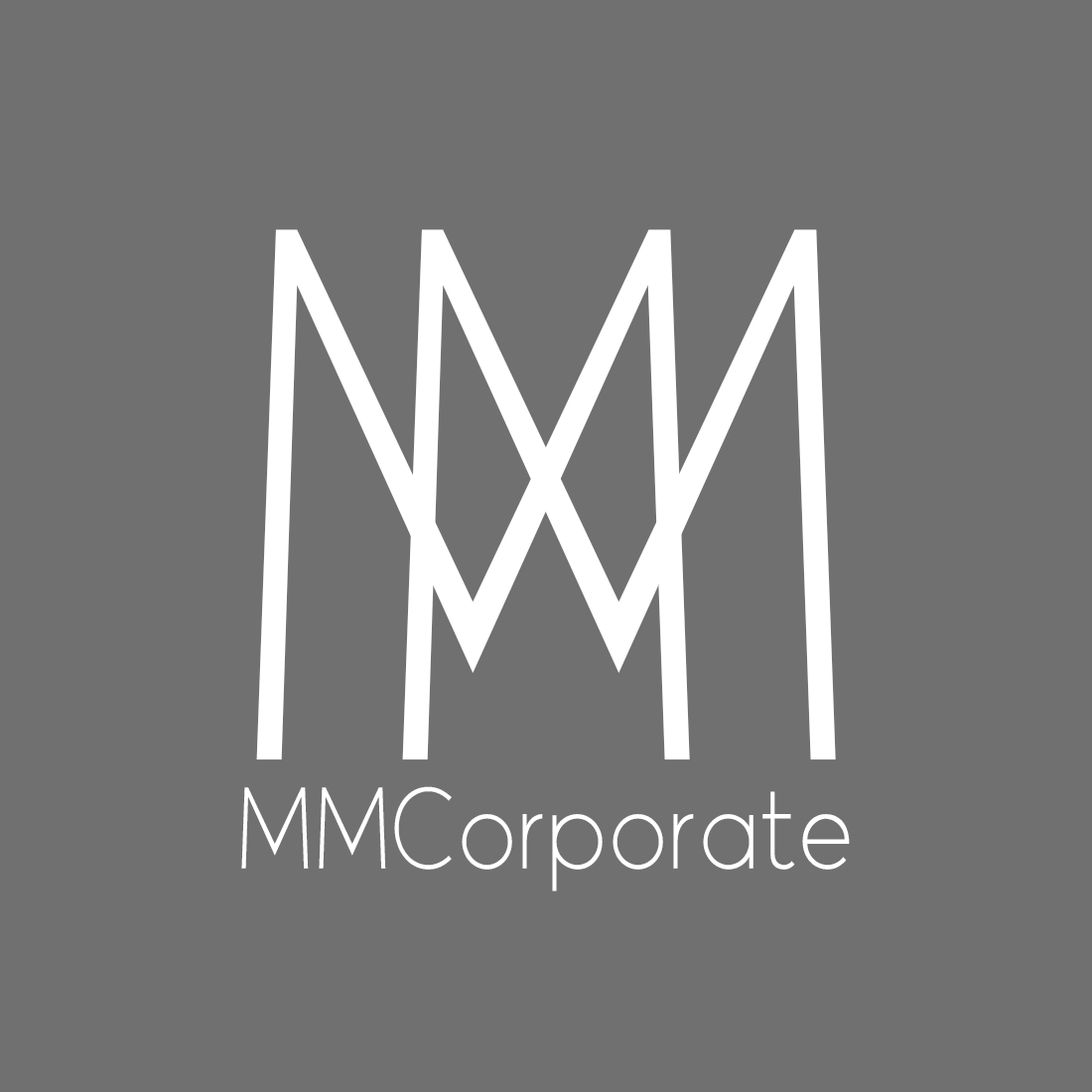
<style>
.page{position:relative;width:1092px;height:1092px;background:#707070}
.page>*{position:absolute;margin:0}
.t1{font:687.9px "THEJung110";letter-spacing:-0.005em;color:#ffffff;text-transform:uppercase;scale:0.9 1}
.t2{font:104.8px "THEJung110";letter-spacing:-0.005em;color:#ffffff;scale:0.9 1}
</style>
<div class="page">
<p class="t1" style="left:256px;top:229px;width:434px;height:531px">m</p>
<p class="t1" style="left:402px;top:229px;width:434px;height:531px">m</p>
<p class="t2" style="left:241px;top:786px;width:609px;height:105px">MMCorporate</p>
</div>
